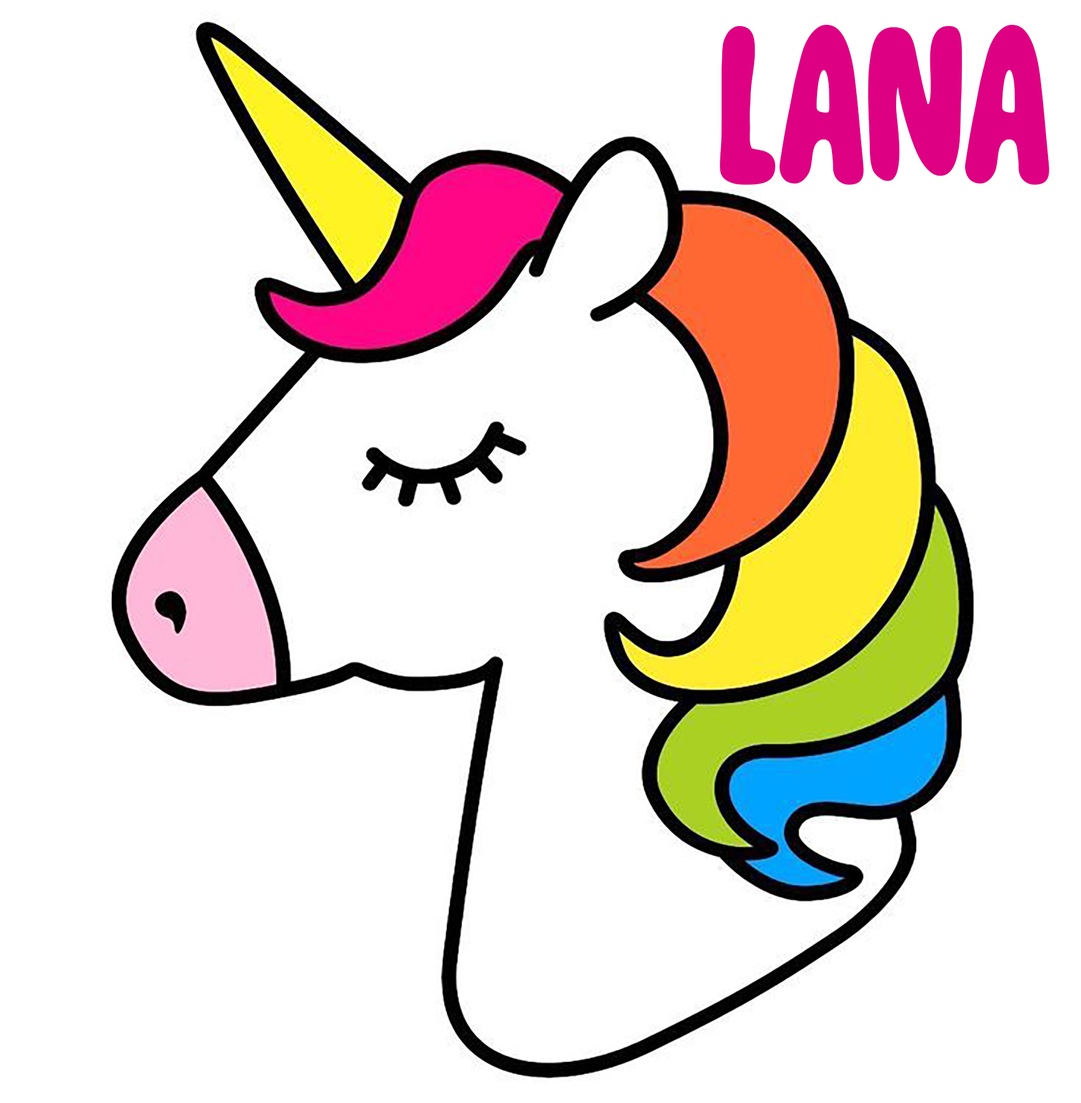
<style>
.page{position:relative;width:1081px;height:1103px;background:#ffffff}
.page>*{position:absolute;margin:0}
.t1{font:233.5px "Unpack-Regular";color:#de0083}
</style>
<div class="page">
<p class="t1" style="left:720px;top:24px;width:329px;height:161px">Lana</p>
</div>
